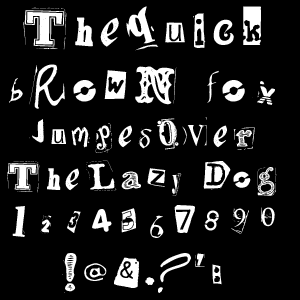
<style>
.page{position:relative;width:300px;height:300px;background:#000000}
.page>*{position:absolute;margin:0}
.t1{font:36px "RansomThreat";letter-spacing:0.1em;color:#ffffff}
.t2{font:48px "RansomThreat";letter-spacing:0.1em;color:#ffffff}
.t3{font:40px "RansomThreat";letter-spacing:0.1em;color:#ffffff}
</style>
<div class="page">
<p class="t1" style="left:7px;top:6px;width:270px;height:287px;text-align:center"><span class="t2">Thequick<br>bRowN fox<br></span>jumpesOver<br>TheLazy Dog<br><span class="t3">1234567890<br>!@&amp;.?':</span></p>
</div>
